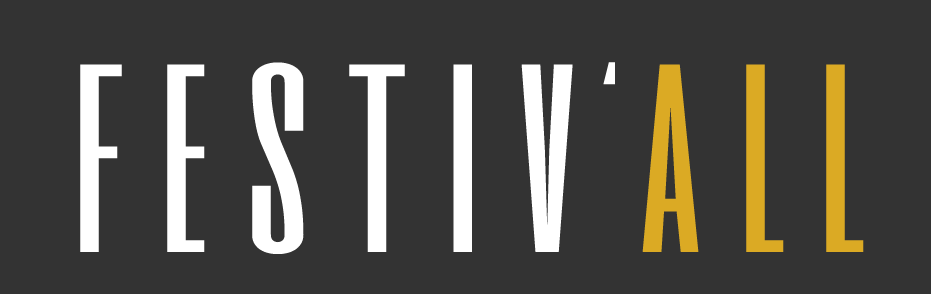
<style>
.page{position:relative;width:931px;height:294px;background:#333333}
.page>*{position:absolute;margin:0}
.t1{font:250px "SixCaps";color:#ffffff;scale:1.19 1}
.t2{font:250px "SixCaps";color:#dbaa24;scale:1.19 1}
.t3{font:125px "SixCaps";color:#ffffff;scale:1.19 1}
</style>
<div class="page">
<p class="t1" style="left:80px;top:62px;width:784px;height:192px">f e s t i v  <span class="t2">a l l</span></p>
<p class="t3" style="left:603px;top:62px;width:12px;height:23px">‘</p>
</div>
